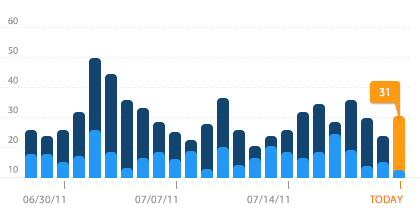
<style>
.page{position:relative;width:420px;height:212px;background:#ffffff}
.page>*{position:absolute;margin:0}
.t1{font:10px/29.7px "MyriadPro-Regular";color:#999999}
.t2{font:12px "MyriadPro-Regular";color:#ffffff}
.t3{font:11px "MyriadPro-Regular";color:#999999}
.t4{font:11px "MyriadPro-Regular";color:#fe7f13}
</style>
<div class="page">
<p class="t1" style="left:8px;top:17px;width:10px;height:156px;text-align:right">60<br>50<br>40<br>30<br>20<br>10</p>
<p class="t2" style="left:379px;top:88px;width:10px;height:9px">31</p>
<p class="t3" style="left:23px;top:195px;width:42px;height:9px">06/30/11</p>
<p class="t3" style="left:135px;top:195px;width:42px;height:9px">07/07/11</p>
<p class="t3" style="left:247px;top:195px;width:42px;height:9px">07/14/11</p>
<p class="t4" style="left:369px;top:195px;width:34px;height:9px">TODAY</p>
</div>
